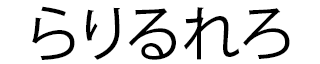
<style>
.page{position:relative;width:320px;height:64px;background:#ffffff}
.page>*{position:absolute;margin:0}
.t1{font:60px "KozGoPr6N-Regular";color:#000000}
</style>
<div class="page">
<p class="t1" style="left:32px;top:6px;width:258px;height:54px">らりるれろ</p>
</div>
